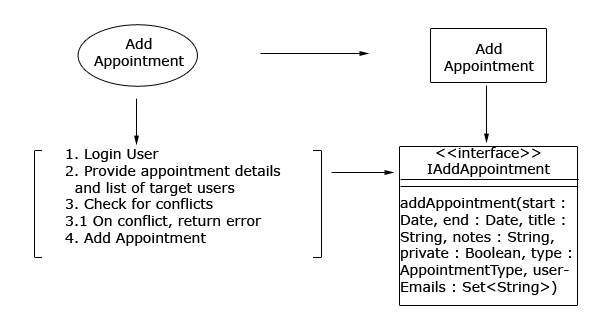
<style>
.page{position:relative;width:614px;height:326px;background:#ffffff}
.page>*{position:absolute;margin:0}
.t1{font:14px "Verdana";color:#000000}
</style>
<div class="page">
<p class="t1" style="left:94px;top:38px;width:90px;height:31px;text-align:center">Add<br>Appointment</p>
<p class="t1" style="left:444px;top:43px;width:90px;height:31px;text-align:center">Add<br>Appointment</p>
<p class="t1" style="left:65px;top:149px;width:216px;height:97px">1. Login User<br>2. Provide appointment details<br>  and list of target users<br>3. Check for conflicts<br>3.1 On conflict, return error<br>4. Add Appointment</p>
<p class="t1" style="left:400px;top:147px;width:171px;height:148px;text-align:center">&lt;&lt;interface&gt;&gt;<br>IAddAppointment<br><br>addAppointment(start : Date, end : Date, title : String, notes : String, private : Boolean, type : AppointmentType, userEmails : Set&lt;String&gt;)</p>
</div>
